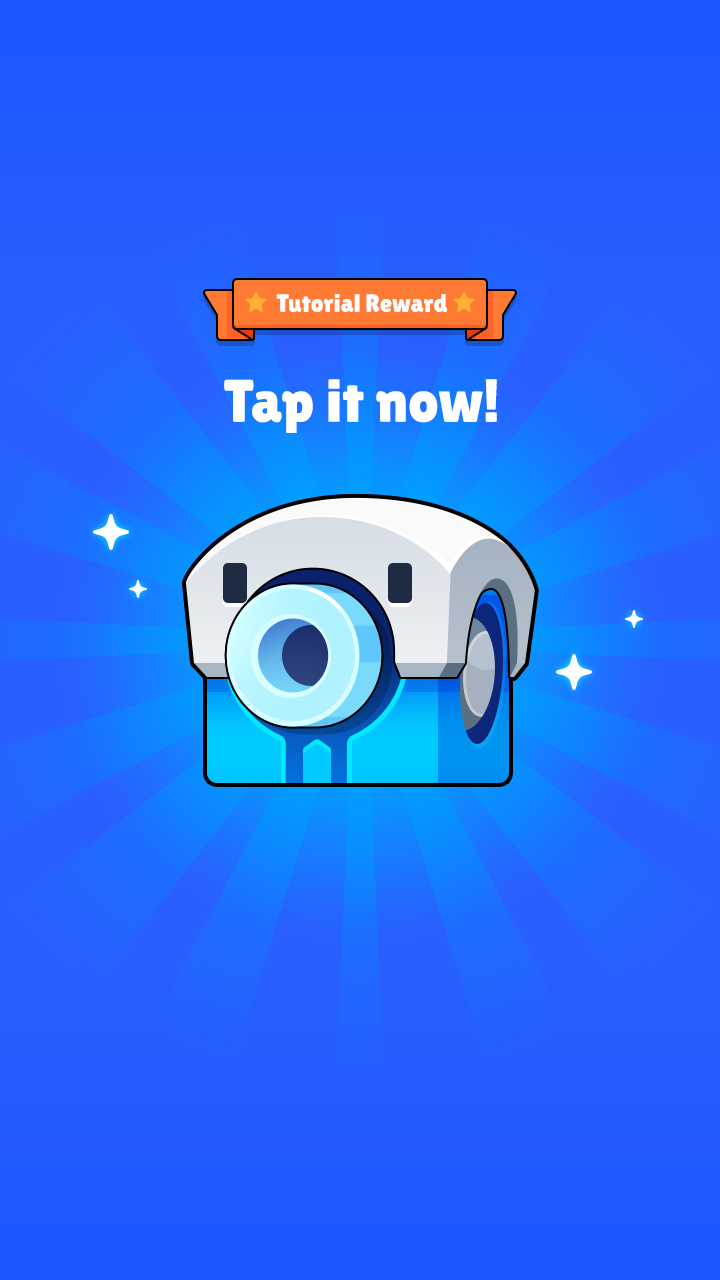
<style>
.page{position:relative;width:720px;height:1280px}
.page>*{position:absolute;margin:0}
.t1{font:25px "LilitaOne";color:#ffffff}
.t2{font:60px "LilitaOne";color:#ffffff}
</style>
<div class="page">
<p class="t1" style="left:276px;top:294px;width:172px;height:18px">Tutorial Reward</p>
<p class="t2" style="left:224px;top:379px;width:273px;height:54px">Tap it now!</p>
</div>
